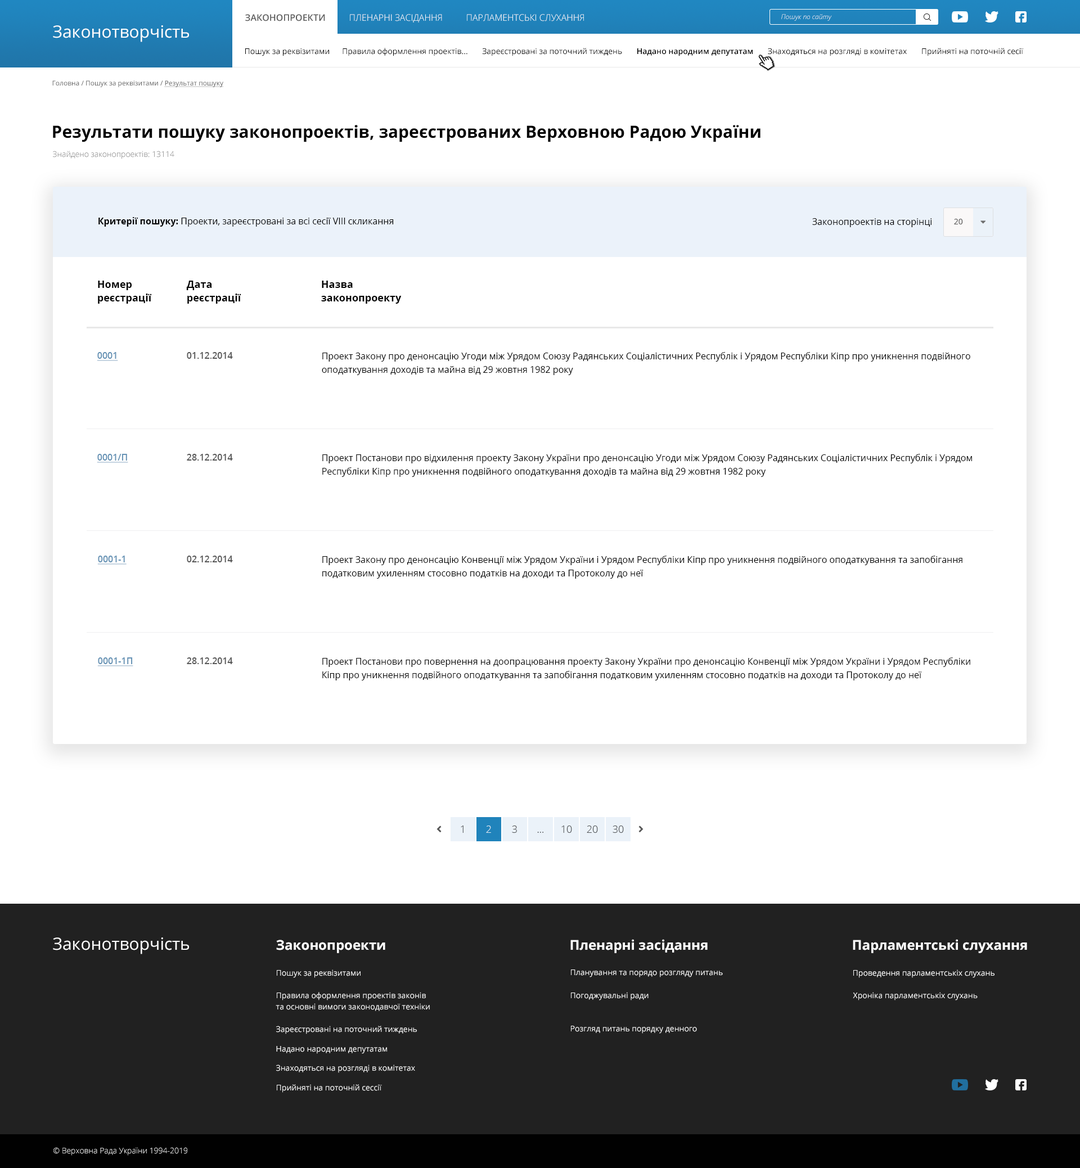
<style>
.page{position:relative;width:1080px;height:1168px;background:#ffffff}
.page>*{position:absolute;margin:0}
.t1{font:9px "OpenSans-SemiBold";color:#585858;text-transform:uppercase}
.t2{font:9px "OpenSans-Light";color:#ffffff;text-transform:uppercase}
.t3{font:6.8px "OpenSans-LightItalic";color:#ffffff}
.t4{font:16.9px "OpenSans-Regular";color:#ffffff}
.t5{font:7.9px "OpenSans-Regular";color:#000000}
.t6{font:7.9px "OpenSans-SemiBold";color:#000000}
.t7{font:6.8px "OpenSans-Regular";color:#585858}
.t8{font:6.8px "OpenSans-Regular";color:#585858;text-decoration:underline}
.t9{font:16.9px "OpenSans-Bold";color:#000000}
.t10{font:7.9px "OpenSans-Light"}
.t11{font:9px "OpenSans-Regular";color:#000000}
.t12{font:9px "OpenSans-Bold";color:#000000}
.t13{font:7.9px "OpenSans-Regular";color:#565555}
.t14{font:10.1px/13.5px "OpenSans-Bold";color:#000000}
.t15{font:9px "OpenSans-SemiBold";color:#6592b5;text-decoration:underline}
.t16{font:9px "OpenSans-SemiBold";color:#585858}
.t17{font:9px/13.5px "OpenSans-Regular";color:#000000}
.t18{font:10.1px "OpenSans-Light"}
.t19{font:10.1px "OpenSans-Light";color:#dfeaf2}
.t20{font:10.1px "OpenSans-Light";color:#505355}
.t21{font:13.5px "OpenSans-Bold";color:#ffffff}
.t22{font:7.9px "OpenSans-Regular";color:#ffffff}
.t23{font:7.9px/11.3px "OpenSans-Regular";color:#ffffff}
.t24{font:7.9px/14.6px "OpenSans-Regular";color:#ffffff}
.t25{font:7.9px "OpenSans-Light";color:#ffffff}
</style>
<div class="page">
<p class="t1" style="left:245px;top:14px;width:80px;height:7px">Законопроекти</p>
<p class="t2" style="left:350px;top:14px;width:92px;height:9px">пленарні засідання</p>
<p class="t2" style="left:467px;top:14px;width:117px;height:7px">парламентські слухання</p>
<p class="t3" style="left:781px;top:14px;width:51px;height:7px">Пошук по сайту</p>
<p class="t4" style="left:53px;top:25px;width:136px;height:17px">Законотворчість</p>
<p class="t5" style="left:245px;top:48px;width:778px;height:8px">Пошук за реквізитами      Правила оформлення проектів...       Зареєстровані за поточний тиждень       <span class="t6">Надано народним депутатам</span>       Знаходяться на розгляді в комітетах       Прийняті на поточній сесії</p>
<p class="t7" style="left:52px;top:80px;width:171px;height:7px">Головна / Пошук за реквізитами / <span class="t8">Результат пошуку</span></p>
<p class="t9" style="left:53px;top:125px;width:708px;height:17px">Результати пошуку законопроектiв, зареєстрованих Верховною Радою України</p>
<p class="t10" style="left:53px;top:151px;width:121px;height:8px">Знайдено законопроектів: 13114</p>
<p class="t11" style="left:98px;top:217px;width:296px;height:10px"><span class="t12">Критерії пошуку: </span>Проекти, зареєстровані за всі сесії VIII скликання</p>
<p class="t11" style="left:812px;top:218px;width:120px;height:9px">Законопроектів на сторінці</p>
<p class="t13" style="left:954px;top:219px;width:9px;height:5px">20</p>
<p class="t14" style="left:98px;top:281px;width:54px;height:23px">Номер<br>реєстрацiї</p>
<p class="t14" style="left:186px;top:281px;width:55px;height:23px">Дата<br>реєстрації</p>
<p class="t14" style="left:321px;top:281px;width:81px;height:23px">Назва<br>законопроекту</p>
<p class="t15" style="left:97px;top:352px;width:21px;height:9px">0001</p>
<p class="t16" style="left:187px;top:352px;width:46px;height:7px">01.12.2014</p>
<p class="t17" style="left:322px;top:352px;width:648px;height:23px">Проект Закону про денонсацію Угоди між Урядом Союзу Радянських Соціалістичних Республік і Урядом Республіки Кіпр про уникнення подвійного оподаткування доходів та майна від 29 жовтня 1982 року</p>
<p class="t15" style="left:97px;top:454px;width:31px;height:9px">0001/П</p>
<p class="t16" style="left:187px;top:454px;width:46px;height:7px">28.12.2014</p>
<p class="t17" style="left:322px;top:454px;width:650px;height:23px">Проект Постанови про відхилення проекту Закону України про денонсацію Угоди між Урядом Союзу Радянських Соціалістичних Республік і Урядом Республіки Кіпр про уникнення подвійного оподаткування доходів та майна від 29 жовтня 1982 року</p>
<p class="t15" style="left:97px;top:556px;width:30px;height:9px">0001-1</p>
<p class="t16" style="left:187px;top:556px;width:46px;height:7px">02.12.2014</p>
<p class="t17" style="left:322px;top:556px;width:640px;height:23px">Проект Закону про денонсацію Конвенції між Урядом України і Урядом Республіки Кіпр про уникнення подвійного оподаткування та запобігання податковим ухиленням стосовно податків на доходи та Протоколу до неї</p>
<p class="t15" style="left:97px;top:658px;width:36px;height:9px">0001-1П</p>
<p class="t16" style="left:187px;top:658px;width:46px;height:6px">28.12.2014</p>
<p class="t17" style="left:322px;top:658px;width:648px;height:23px">Проект Постанови про повернення на доопрацювання проекту Закону України про денонсацію Конвенції між Урядом України і Урядом Республіки Кіпр про уникнення подвійного оподаткування та запобігання податковим ухиленням стосовно податків на доходи та Протоколу до неї</p>
<p class="t18" style="left:461px;top:826px;width:3px;height:7px">1</p>
<p class="t19" style="left:486px;top:826px;width:5px;height:7px">2</p>
<p class="t20" style="left:512px;top:826px;width:5px;height:7px">3</p>
<p class="t20" style="left:537px;top:832px;width:6px;height:1px">...</p>
<p class="t20" style="left:561px;top:826px;width:11px;height:7px">10</p>
<p class="t20" style="left:587px;top:826px;width:11px;height:7px">20</p>
<p class="t20" style="left:613px;top:826px;width:11px;height:7px">30</p>
<p class="t4" style="left:53px;top:938px;width:136px;height:17px">Законотворчість</p>
<p class="t21" style="left:276px;top:940px;width:109px;height:13px">Законопроекти</p>
<p class="t21" style="left:570px;top:939px;width:138px;height:14px">Пленарні засідання</p>
<p class="t21" style="left:853px;top:939px;width:174px;height:14px">Парламентські слухання</p>
<p class="t22" style="left:277px;top:970px;width:84px;height:8px">Пошук за реквізитами</p>
<p class="t22" style="left:571px;top:970px;width:152px;height:8px">Планування та порядо розгляду питань</p>
<p class="t22" style="left:853px;top:970px;width:142px;height:8px">Проведення парламентськіх слухань</p>
<p class="t23" style="left:276px;top:992px;width:154px;height:19px"><span class="t24">Правила оформлення проектів законів<br></span>та основні вимоги законодавчої техніки</p>
<p class="t22" style="left:571px;top:992px;width:78px;height:9px">Погоджувальні ради</p>
<p class="t22" style="left:853px;top:992px;width:125px;height:9px">Хроніка парламентськіх слухань</p>
<p class="t22" style="left:276px;top:1026px;width:141px;height:8px">Зареєстровані на поточний тиждень</p>
<p class="t22" style="left:571px;top:1026px;width:126px;height:8px">Розгляд питань порядку денного</p>
<p class="t22" style="left:276px;top:1046px;width:111px;height:8px">Надано народним депутатам</p>
<p class="t22" style="left:276px;top:1065px;width:139px;height:8px">Знаходяться на розгляді в комітетах</p>
<p class="t22" style="left:277px;top:1085px;width:105px;height:8px">Прийняті на поточній сессії</p>
<p class="t25" style="left:53px;top:1148px;width:134px;height:8px">© Верховна Рада України 1994-2019</p>
</div>
